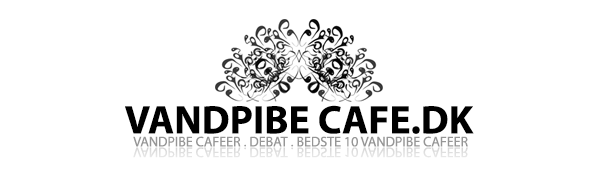
<style>
.page{position:relative;width:600px;height:170px;background:#ffffff}
.page>*{position:absolute;margin:0}
.t1{font:40px "MyriadPro-Bold";color:#000000}
.t2{font:14px "MyriadPro-Regular";color:#969696}
.t3{font:14px "MyriadPro-Regular";color:#e1e1e1}
</style>
<div class="page">
<p class="t1" style="left:125px;top:105px;width:349px;height:29px">VANDPIBE CAFE.DK</p>
<p class="t2" style="left:133px;top:136px;width:335px;height:11px">VANDPIBE CAFEER . DEBAT . BEDSTE 10 VANDPIBE CAFEER</p>
<p class="t3" style="left:133px;top:147px;width:335px;height:11px">VANDPIBE CAFEER . DEBAT . BEDSTE 10 VANDPIBE CAFEER</p>
</div>
